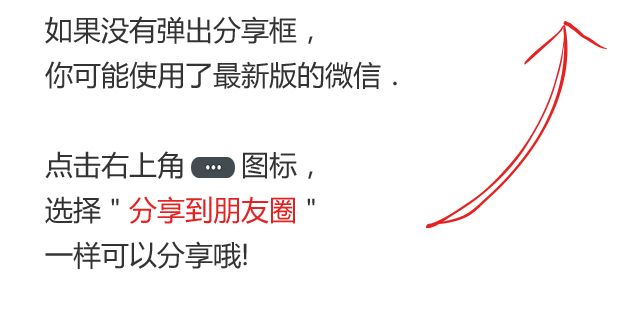
<style>
.page{position:relative;width:640px;height:315px;background:#ffffff}
.page>*{position:absolute;margin:0}
.t1{font:28px/45px "MicrosoftYaHei";color:#333333}
.t2{font:28px/45px "MicrosoftYaHei";color:#e42222}
</style>
<div class="page">
<p class="t1" style="left:45px;top:16px;width:352px;height:253px">如果没有弹出分享框，<br>你可能使用了最新版的微信．<br><br>点击右上角　　图标，<br>选择＂<span class="t2">分享到朋友圈</span>＂<br>一样可以分享哦!</p>
</div>
